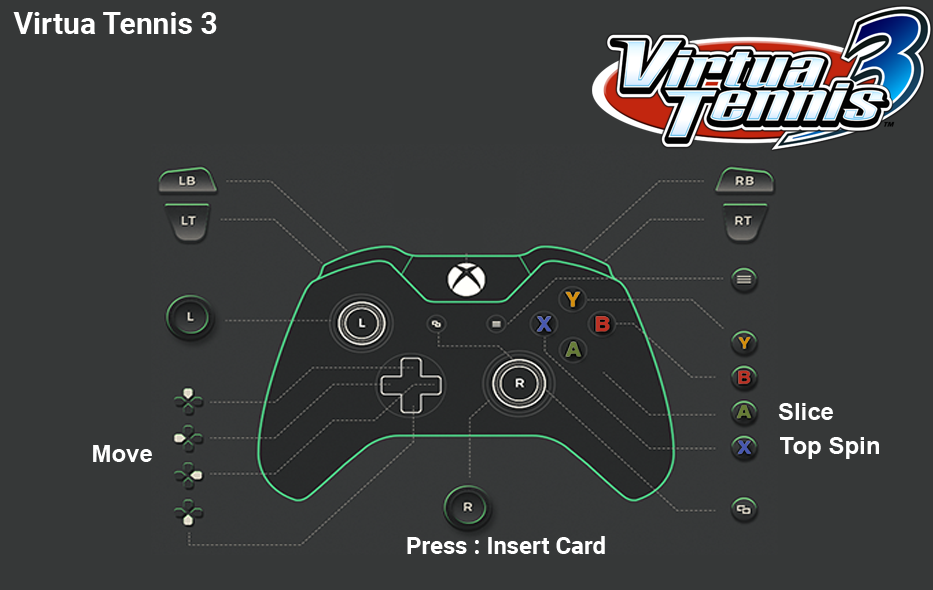
<style>
.page{position:relative;width:933px;height:590px;background:#363838}
.page>*{position:absolute;margin:0}
.t1{font:30px "Roboto-Bold";color:#ffffff}
.t2{font:24px "Arial-BoldMT";color:#fefefe}
.t3{font:24px "Roboto-Bold";color:#ffffff}
</style>
<div class="page">
<p class="t1" style="left:13px;top:12px;width:204px;height:22px">Virtua Tennis 3</p>
<p class="t2" style="left:778px;top:403px;width:55px;height:17px">Slice</p>
<p class="t2" style="left:780px;top:437px;width:99px;height:22px">Top Spin</p>
<p class="t2" style="left:93px;top:445px;width:59px;height:17px">Move</p>
<p class="t3" style="left:407px;top:536px;width:198px;height:18px">Press : Insert Card</p>
</div>
